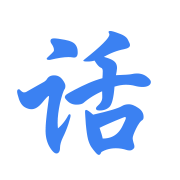
<style>
.page{position:relative;width:180px;height:180px;background:#ffffff}
.page>*{position:absolute;margin:0}
.t1{font:158.2px "STXingkai-SC-Bold";color:#3b81f2}
</style>
<div class="page">
<p class="t1" style="left:17px;top:31px;width:134px;height:124px">话</p>
</div>
